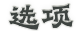
<style>
.page{position:relative;width:81px;height:31px;background:#ffffff}
.page>*{position:absolute;margin:0}
.t1{font:32.6px "GraveBustedStoneLishuSCRoughlyC";color:#3f4542}
</style>
<div class="page">
<p class="t1" style="left:9px;top:4px;width:64px;height:26px;rotate:-1deg">选项</p>
</div>
